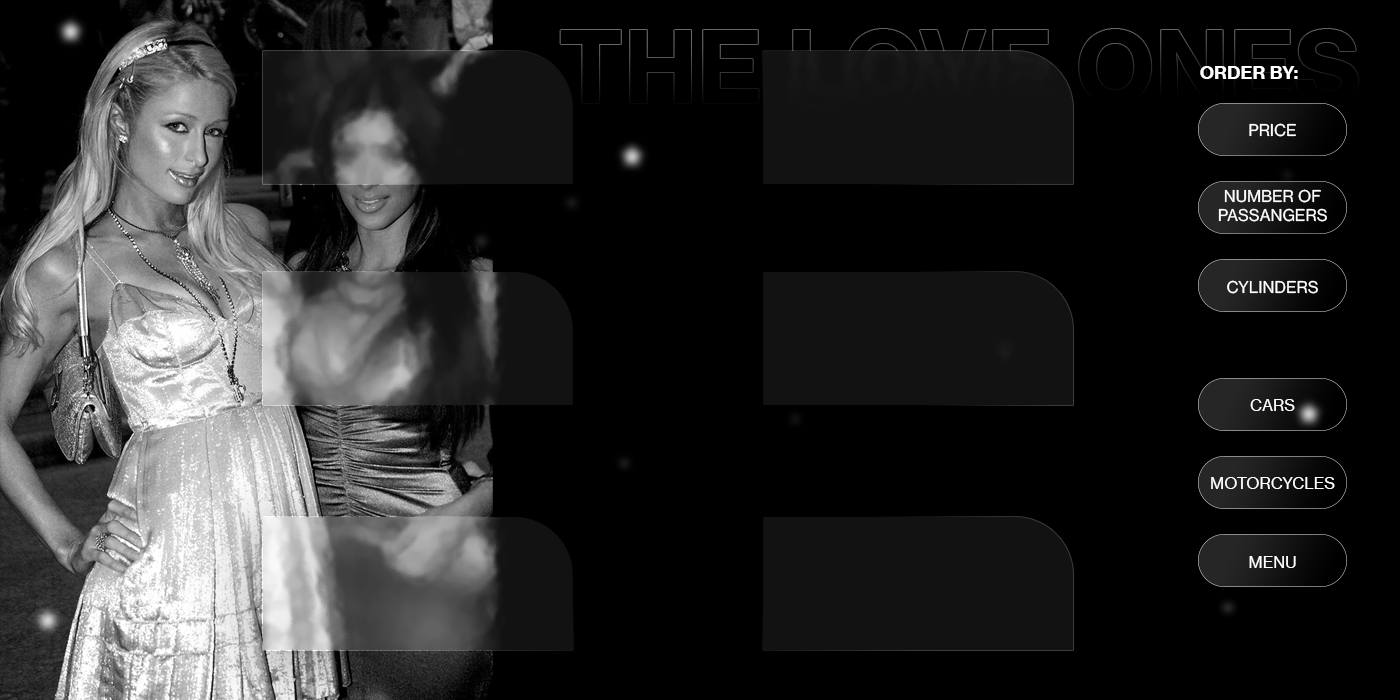
<style>
.page{position:relative;width:1400px;height:700px;background:#000000}
.page>*{position:absolute;margin:0}
.t1{font:18px "NHaasGroteskTXPro-75Bd";color:#ffffff}
.t2{font:16px "NHaasGroteskTXPro-55Rg";color:#ffffff}
</style>
<div class="page">
<p class="t1" style="left:1200px;top:66px;width:98px;height:13px">ORDER BY:</p>
<p class="t2" style="left:1249px;top:123px;width:47px;height:14px">PRICE</p>
<p class="t2" style="left:1218px;top:189px;width:109px;height:33px;text-align:center">NUMBER OF PASSANGERS</p>
<p class="t2" style="left:1227px;top:280px;width:91px;height:14px">CYLINDERS</p>
<p class="t2" style="left:1250px;top:399px;width:45px;height:12px">CARS</p>
<p class="t2" style="left:1211px;top:477px;width:124px;height:12px">MOTORCYCLES</p>
<p class="t2" style="left:1249px;top:556px;width:47px;height:12px">MENU</p>
</div>
